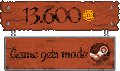
<style>
.page{position:relative;width:120px;height:71px}
.page>*{position:absolute;margin:0}
.t1{font:21.7px "God'sChoice-Bold";letter-spacing:-0.065em}
.t2{font:12px "God'sChoice-Bold";letter-spacing:-0.065em}
</style>
<div class="page">
<p class="t1" style="left:23px;top:7px;width:58px;height:18px">13.600</p>
<p class="t2" style="left:10px;top:47px;width:78px;height:15px">Game gets made</p>
</div>
